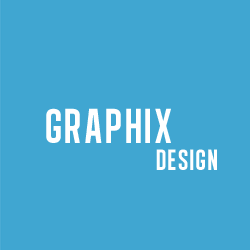
<style>
.page{position:relative;width:250px;height:250px;background:#40a6d1}
.page>*{position:absolute;margin:0}
.t1{font:50px "AlgreSansNC";letter-spacing:0.05em;color:#ffffff}
.t2{font:30px "AlgreSansNC";letter-spacing:0.05em;color:#ffffff}
</style>
<div class="page">
<p class="t1" style="left:46px;top:108px;width:125px;height:35px">GRAPHIX</p>
<p class="t2" style="left:156px;top:149px;width:61px;height:21px">DESIGN</p>
</div>
